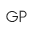
<style>
.page{position:relative;width:32px;height:32px;background:#ffffff}
.page>*{position:absolute;margin:0}
.t1{font:15.9px "BanksMilesSingleLine";color:#1d1d1d}
</style>
<div class="page">
<p class="t1" style="left:6px;top:10px;width:21px;height:13px">GP</p>
</div>
